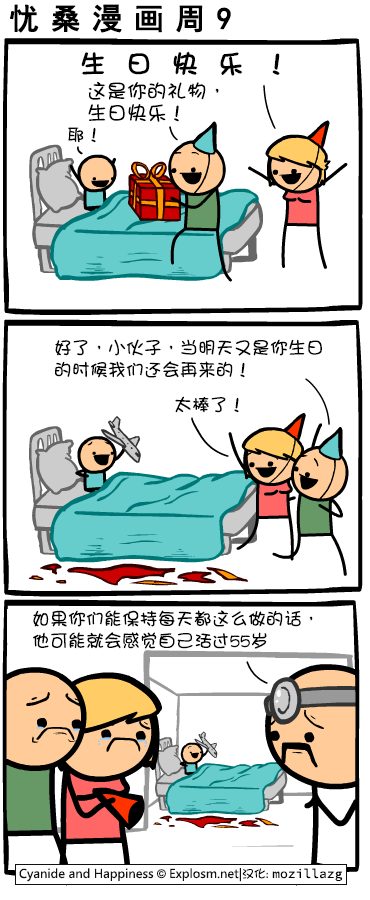
<style>
.page{position:relative;width:370px;height:900px;background:#ffffff}
.page>*{position:absolute;margin:0}
.t1{font:30px "SimHei";letter-spacing:0.36em;color:#000000;font-weight:bold}
.t2{font:26px "DFGirl";letter-spacing:0.74em;color:#000000;font-weight:bold}
.t3{font:20px/22px "DFGirl";color:#000000}
.t4{font:18px "DFGirl";color:#000000}
.t5{font:18px/22px "DFGirl";color:#000000}
</style>
<div class="page">
<p class="t1" style="left:10px;top:4px;width:221px;height:29px">忧桑漫画周9</p>
<p class="t2" style="left:81px;top:51px;width:199px;height:25px">生日快乐！</p>
<p class="t3" style="left:88px;top:81px;width:131px;height:41px">这是你的礼物，<br>生日快乐！</p>
<p class="t4" style="left:68px;top:127px;width:28px;height:16px">耶！</p>
<p class="t5" style="left:55px;top:339px;width:267px;height:39px">好了，小伙子，当明天又是你生日<br>的时候我们还会再来的！</p>
<p class="t4" style="left:175px;top:396px;width:64px;height:17px">太棒了！</p>
<p class="t5" style="left:33px;top:610px;width:280px;height:39px">如果你们能保持每天都这么做的话，<br>他可能就会感觉自己活过55岁</p>
</div>
